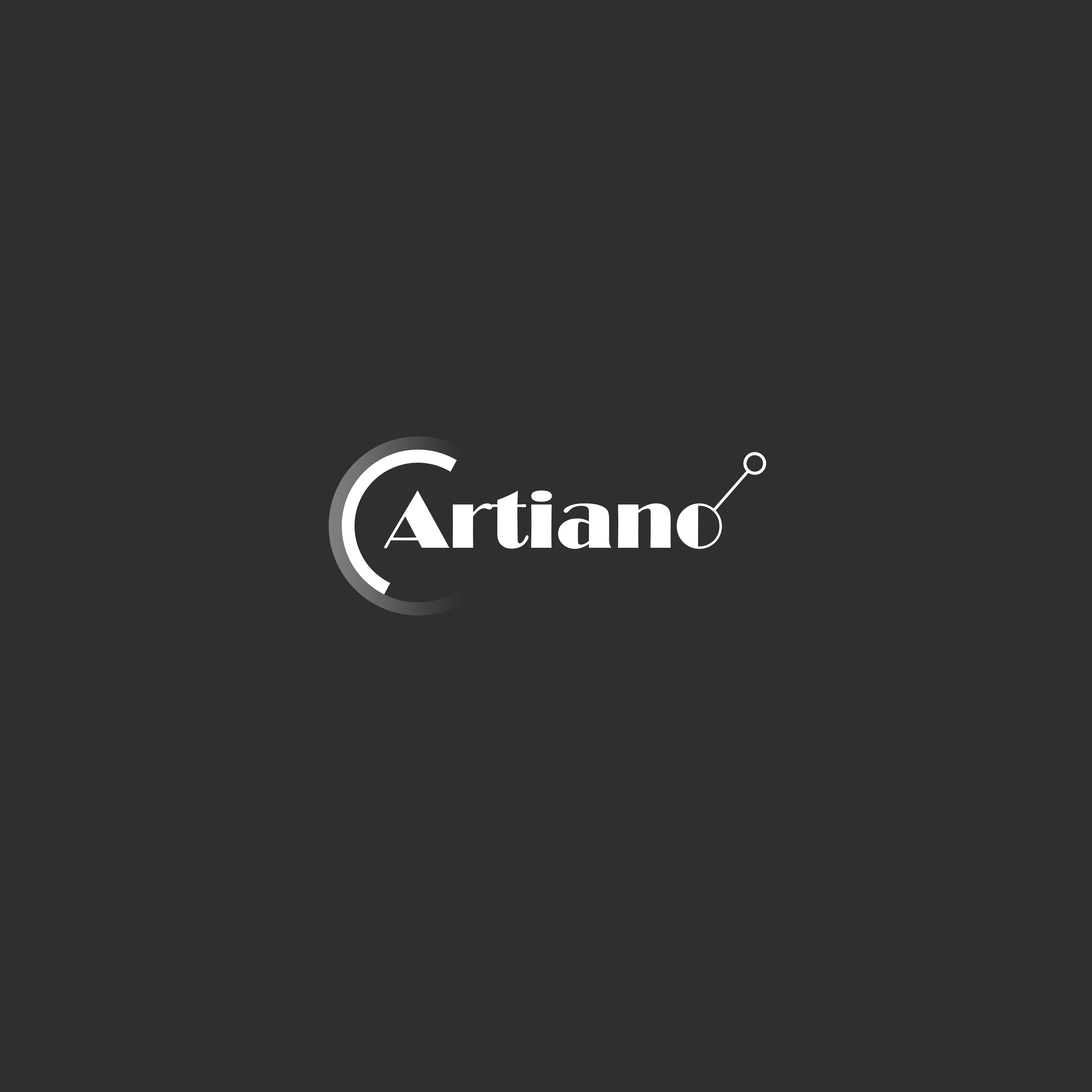
<style>
.page{position:relative;width:1092px;height:1092px;background:#2f2f2f}
.page>*{position:absolute;margin:0}
.t1{font:81.2px "Broadway";color:#ffffff}
</style>
<div class="page">
<p class="t1" style="left:384px;top:490px;width:338px;height:59px">Artiano</p>
</div>
